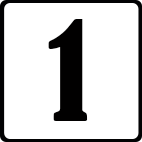
<style>
.page{position:relative;width:142px;height:142px;background:#ffffff}
.page>*{position:absolute;margin:0}
.t1{font:129.4px "BernardMT-Condensed";color:#010000}
</style>
<div class="page">
<p class="t1" style="left:48px;top:19px;width:40px;height:102px">1</p>
</div>
